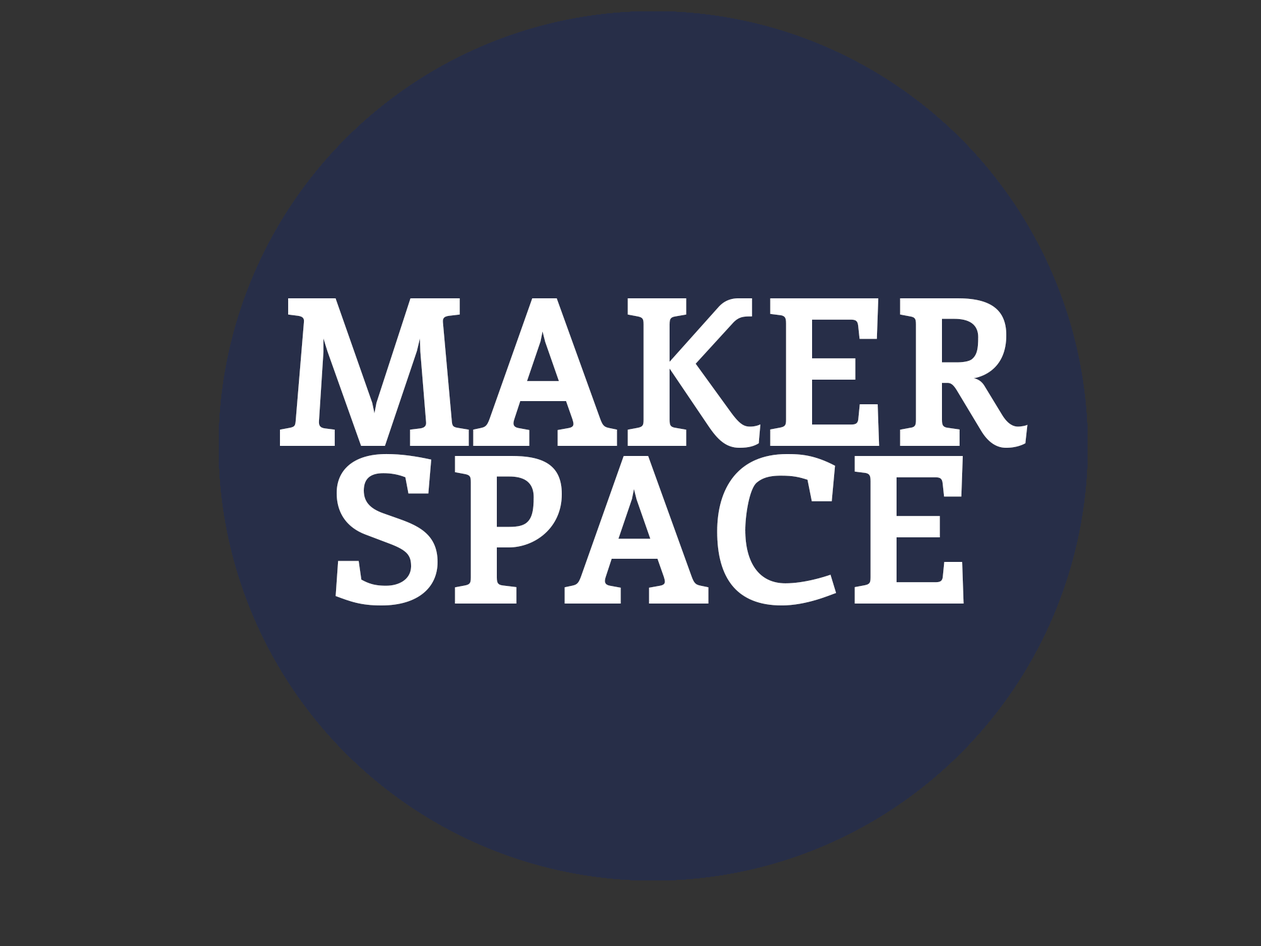
<style>
.page{position:relative;width:1261px;height:946px;background:#333333}
.page>*{position:absolute;margin:0}
.t1{font:204.9px/157.6px "Enriqueta-Bold";color:#ffffff}
.t2{font:204.9px "Enriqueta-Bold";color:#ffffff}
</style>
<div class="page">
<p class="t1" style="left:280px;top:298px;width:748px;height:307px;text-align:center"><span class="t2">MA</span>KER<br>SPACE</p>
</div>
